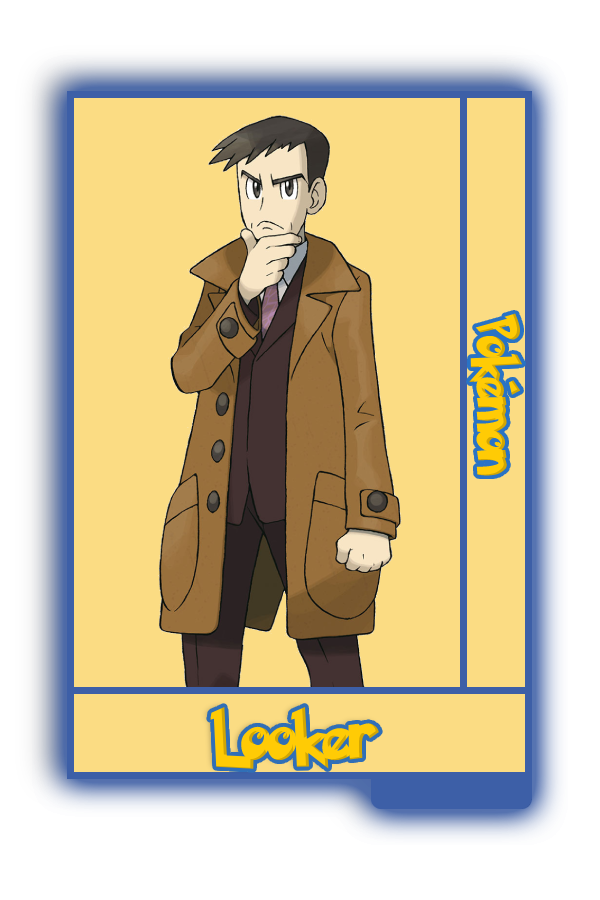
<style>
.page{position:relative;width:600px;height:900px;background:#fbdc83}
.page>*{position:absolute;margin:0}
.t1{font:48.8px "PokemonSolidNormal";color:#ffcb05;scale:0.8 1}
.t2{font:56.6px "PokemonSolidNormal";color:#ffcb05;scale:0.92 1}
</style>
<div class="page">
<p class="t1" style="left:469px;top:313px;width:54px;height:163px;rotate:90deg">Pokémon</p>
<p class="t2" style="left:210px;top:706px;width:169px;height:63px">Looker</p>
</div>
